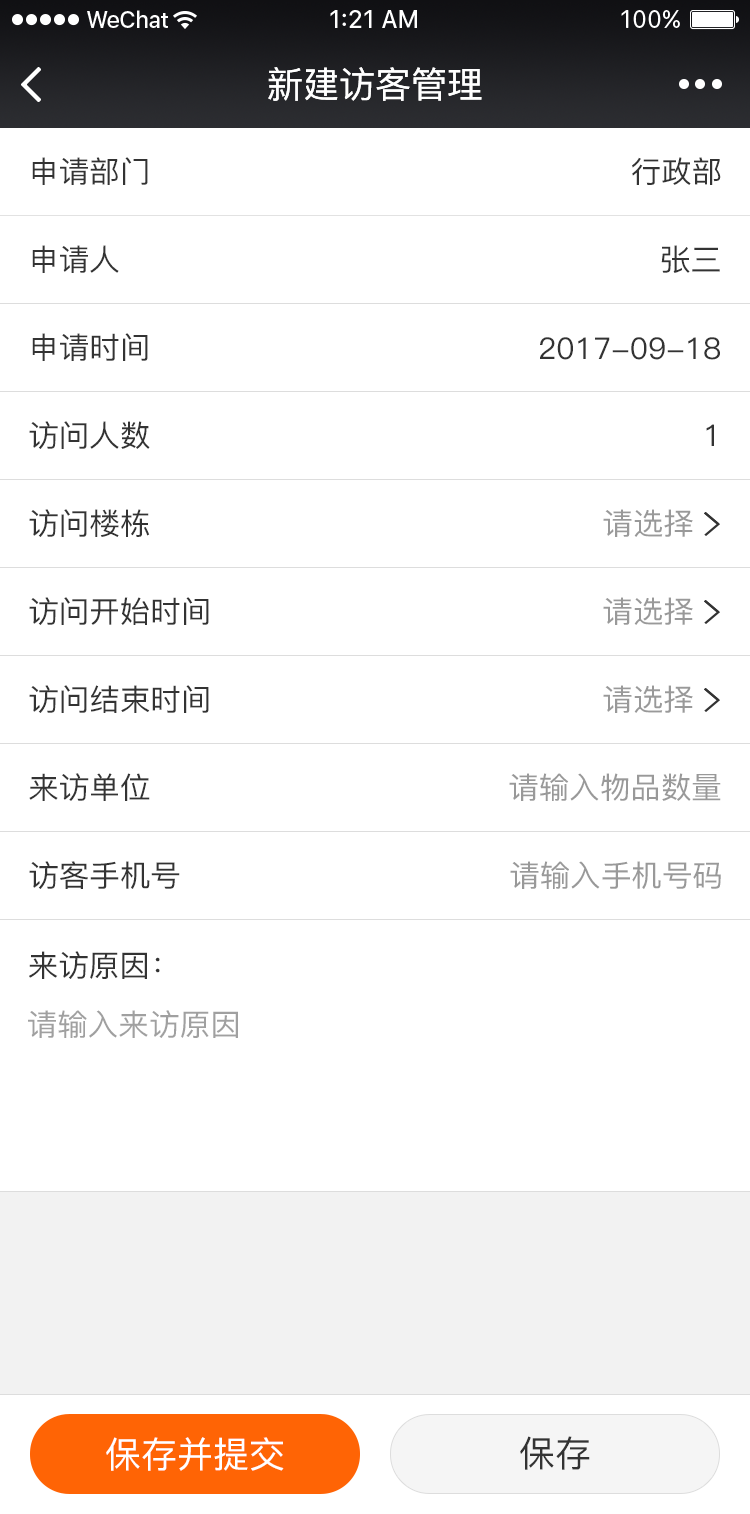
<style>
.page{position:relative;width:750px;height:1514px;background:#ffffff}
.page>*{position:absolute;margin:0}
.t1{font:36px "PingFang-SC-Medium";color:#ffffff}
.t2{font:30px "PingFang-SC-Medium";color:#333333}
.t3{font:30px "PingFang-SC-Medium";color:#999999}
.t4{font:30px "PingFang-SC-Medium";color:#a0a0a0}
.t5{font:36px "PingFang-SC-Medium";color:#333333}
</style>
<div class="page">
<p class="t1" style="left:268px;top:67px;width:214px;height:34px">新建访客管理</p>
<p class="t2" style="left:32px;top:157px;width:116px;height:28px">申请部门</p>
<p class="t2" style="left:632px;top:157px;width:89px;height:28px">行政部</p>
<p class="t2" style="left:32px;top:245px;width:87px;height:28px">申请人</p>
<p class="t2" style="left:661px;top:245px;width:59px;height:28px">张三</p>
<p class="t2" style="left:32px;top:333px;width:116px;height:28px">申请时间</p>
<p class="t2" style="left:540px;top:337px;width:180px;height:23px">2017-09-18</p>
<p class="t2" style="left:29px;top:421px;width:121px;height:28px">访问人数</p>
<p class="t2" style="left:706px;top:424px;width:8px;height:22px">1</p>
<p class="t2" style="left:29px;top:509px;width:121px;height:28px">访问楼栋</p>
<p class="t3" style="left:603px;top:509px;width:90px;height:28px">请选择</p>
<p class="t2" style="left:29px;top:597px;width:180px;height:28px">访问开始时间</p>
<p class="t3" style="left:603px;top:597px;width:90px;height:28px">请选择</p>
<p class="t2" style="left:29px;top:685px;width:180px;height:28px">访问结束时间</p>
<p class="t3" style="left:603px;top:685px;width:90px;height:28px">请选择</p>
<p class="t2" style="left:29px;top:773px;width:121px;height:28px">来访单位</p>
<p class="t3" style="left:509px;top:773px;width:212px;height:28px">请输入物品数量</p>
<p class="t2" style="left:29px;top:861px;width:151px;height:28px">访客手机号</p>
<p class="t3" style="left:510px;top:861px;width:211px;height:28px">请输入手机号码</p>
<p class="t2" style="left:29px;top:951px;width:131px;height:28px">来访原因：</p>
<p class="t4" style="left:28px;top:1010px;width:210px;height:28px">请输入来访原因</p>
<p class="t1" style="left:106px;top:1437px;width:178px;height:34px">保存并提交</p>
<p class="t5" style="left:520px;top:1436px;width:70px;height:34px">保存</p>
</div>
